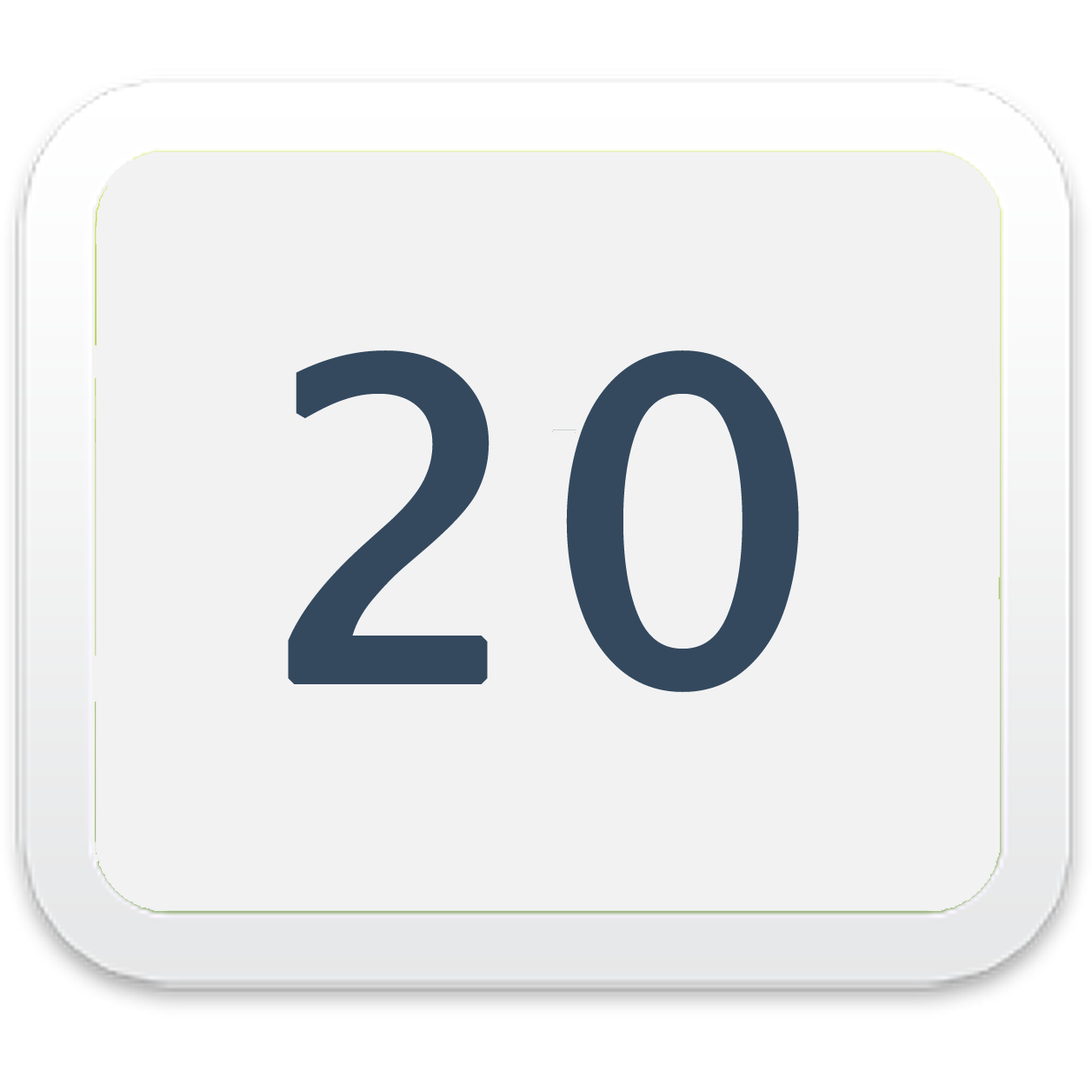
<style>
.page{position:relative;width:1092px;height:1092px;background:#f2f2f3}
.page>*{position:absolute;margin:0}
.t1{font:434.8px "LucidaSans";color:#34495e;font-weight:bold}
</style>
<div class="page">
<p class="t1" style="left:288px;top:350px;width:511px;height:342px">20</p>
</div>
